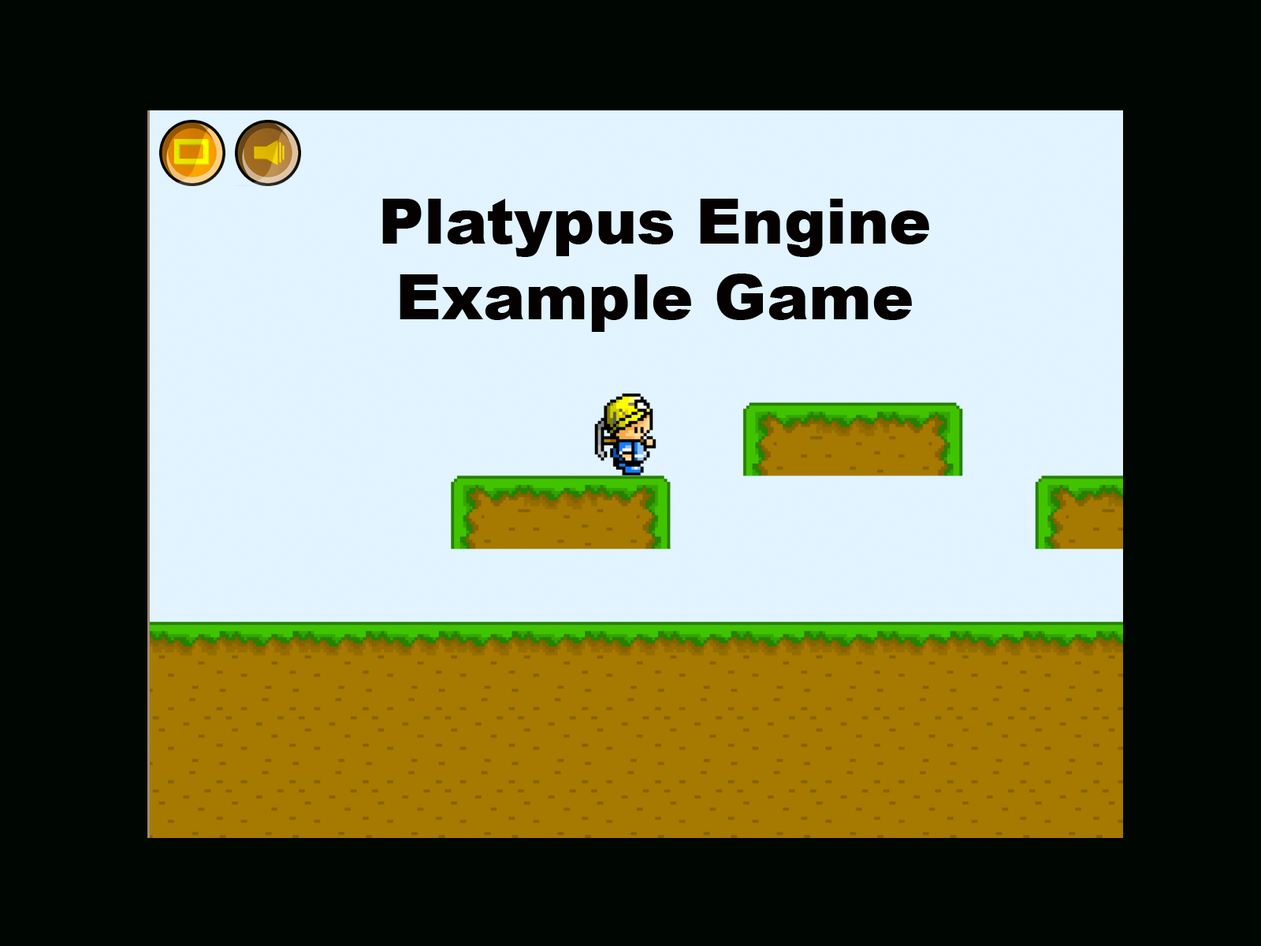
<style>
.page{position:relative;width:1261px;height:946px;background:#000601}
.page>*{position:absolute;margin:0}
.t1{font:63px "Arial-Black";color:#050100}
</style>
<div class="page">
<p class="t1" style="left:382px;top:199px;width:547px;height:133px;text-align:center">Platypus Engine<br>Example Game</p>
</div>
